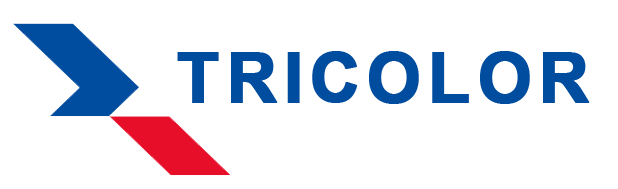
<style>
.page{position:relative;width:618px;height:189px;background:#ffffff}
.page>*{position:absolute;margin:0}
.t1{font:69.3px "Arial-BoldMT";letter-spacing:0.075em;color:#004c9f;font-weight:bold}
</style>
<div class="page">
<p class="t1" style="left:177px;top:51px;width:413px;height:53px">TRICOLOR</p>
</div>
